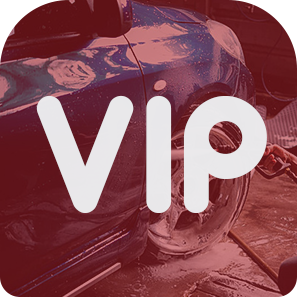
<style>
.page{position:relative;width:297px;height:297px}
.page>*{position:absolute;margin:0}
.t1{font:183.4px "zArista";letter-spacing:0.015em;color:#ececee}
</style>
<div class="page">
<p class="t1" style="left:36px;top:95px;width:231px;height:118px;opacity:0.97">VIP</p>
</div>
